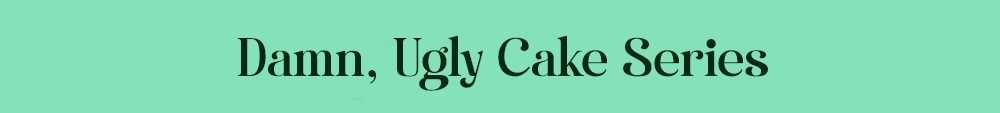
<style>
.page{position:relative;width:1000px;height:113px;background:#83e2ba}
.page>*{position:absolute;margin:0}
.t1{font:54.2px "CalminglyPersonalUse";color:#052819}
.t2{font:54.2px "PlayfairDisplay-Regular";color:#052819}
</style>
<div class="page">
<p class="t1" style="left:237px;top:35px;width:531px;height:56px">Damn<span class="t2">,</span> Ugly Cake Series</p>
</div>
